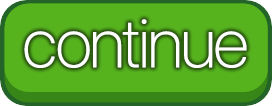
<style>
.page{position:relative;width:272px;height:106px;background:#56b31e}
.page>*{position:absolute;margin:0}
.t1{font:68.8px "SFProDisplay-Thin";letter-spacing:-0.04em;color:#ffffff;font-weight:bold}
</style>
<div class="page">
<p class="t1" style="left:24px;top:19px;width:223px;height:49px">continue</p>
</div>
